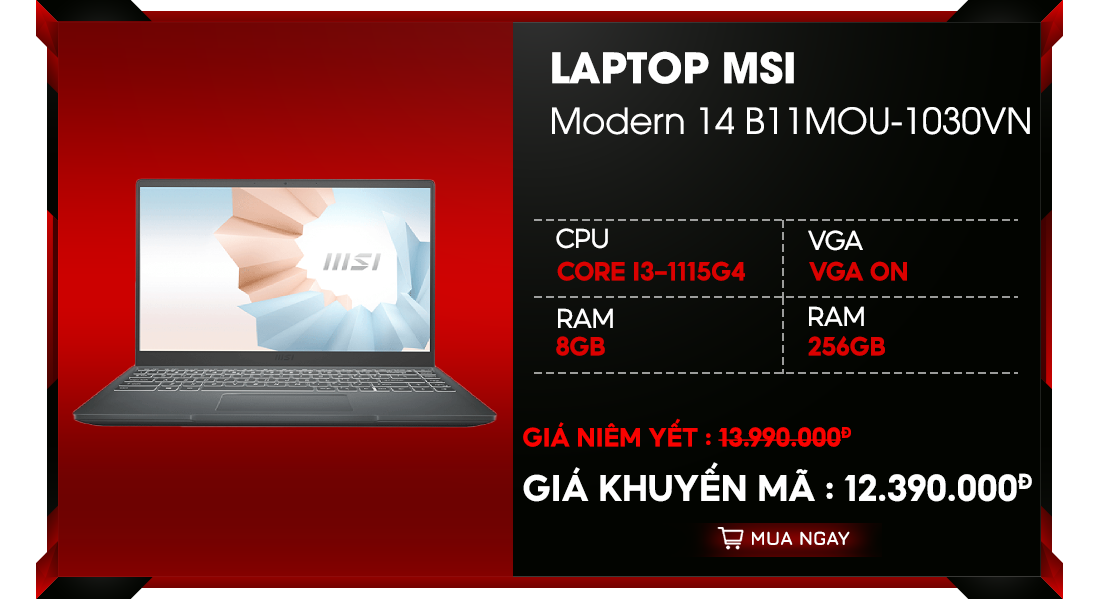
<style>
.page{position:relative;width:1099px;height:599px}
.page>*{position:absolute;margin:0}
.t1{font:35.5px/50.7px "UTM-Avo";color:#ffffff}
.t2{font:41.4px/50.7px "UTMAvoBold";color:#ffffff;text-transform:uppercase}
.t3{font:26.6px "Shopee2021-Regular";color:#ffffff;text-transform:uppercase}
.t4{font:25.5px "Shopee2021-Bold";color:#db0100;text-transform:uppercase}
.t5{font:36.1px/54.5px "Shopee2021-Bold";color:#ffffff;text-transform:uppercase}
.t6{font:25.8px/54.5px "Shopee2021-Bold";color:#fa0200;text-transform:uppercase}
.t7{font:18.9px "#9Slide03JuraBold-Bold";color:#ffffff;text-transform:uppercase}
</style>
<div class="page">
<p class="t1" style="left:552px;top:51px;width:478px;height:84px"><span class="t2">Laptop MSI <br></span>Modern 14 B11MOU-1030VN</p>
<p class="t3" style="left:556px;top:228px;width:52px;height:21px">cpu</p>
<p class="t3" style="left:808px;top:230px;width:55px;height:21px">vga</p>
<p class="t4" style="left:557px;top:261px;width:188px;height:20px">core I3-1115G4</p>
<p class="t4" style="left:809px;top:261px;width:98px;height:20px">vga on</p>
<p class="t3" style="left:558px;top:308px;width:55px;height:20px">ram</p>
<p class="t3" style="left:809px;top:306px;width:55px;height:20px">ram</p>
<p class="t4" style="left:556px;top:336px;width:49px;height:20px">8gb</p>
<p class="t4" style="left:808px;top:336px;width:77px;height:20px">256gb</p>
<p class="t5" style="left:523px;top:418px;width:509px;height:84px"><span class="t6">giá niêm yết : 13.990.000đ<br></span>giá khuyến mã : 12.390.000đ</p>
<p class="t7" style="left:752px;top:531px;width:98px;height:14px">mua ngay</p>
</div>
